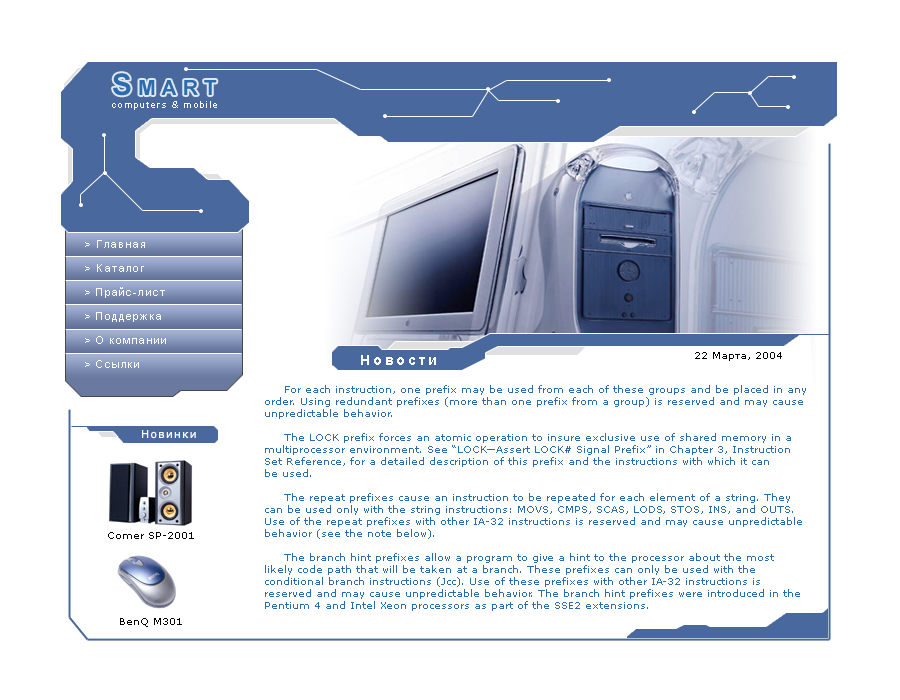
<style>
.page{position:relative;width:900px;height:700px;background:#ffffff}
.page>*{position:absolute;margin:0}
.t1{font:30px "Arial-BoldMT";letter-spacing:0.2em;color:#2b6caf;font-variant:small-caps}
.t2{font:9px "ArialMT";letter-spacing:0.15em;color:#ffffff}
.t3{font:11px/24px "ArialMT";letter-spacing:0.1em;color:#ffffff}
.t4{font:10px "Verdana";color:#000000}
.t5{font:14px "Arial-BoldMT";letter-spacing:0.2em;color:#ffffff}
.t6{font:10px/12px "Verdana";color:#2b6caf}
.t7{font:11px "Verdana";letter-spacing:0.1em;color:#ffffff}
</style>
<div class="page">
<p class="t1" style="left:113px;top:73px;width:104px;height:23px">Smart</p>
<p class="t2" style="left:112px;top:101px;width:105px;height:9px">computers &amp; mobile</p>
<p class="t3" style="left:85px;top:240px;width:81px;height:128px">&gt; Главная<br>&gt; Каталог<br>&gt; Прайс-лист<br>&gt; Поддержка<br>&gt; О компании<br>&gt; Ссылки</p>
<p class="t4" style="left:695px;top:352px;width:87px;height:9px">22 Марта, 2004</p>
<p class="t5" style="left:361px;top:355px;width:75px;height:10px">Новости</p>
<p class="t6" style="left:265px;top:385px;width:541px;height:226px">For each instruction, one prefix may be used from each of these groups and be placed in any<br>order. Using redundant prefixes (more than one prefix from a group) is reserved and may cause<br>unpredictable behavior.<br><br>     The LOCK prefix forces an atomic operation to insure exclusive use of shared memory in a<br>multiprocessor environment. See “LOCK—Assert LOCK# Signal Prefix” in Chapter 3, Instruction<br>Set Reference, for a detailed description of this prefix and the instructions with which it can<br>be used.<br><br>     The repeat prefixes cause an instruction to be repeated for each element of a string. They <br>can be used only with the string instructions: MOVS, CMPS, SCAS, LODS, STOS, INS, and OUTS.<br>Use of the repeat prefixes with other IA-32 instructions is reserved and may cause unpredictable<br>behavior (see the note below).<br><br>     The branch hint prefixes allow a program to give a hint to the processor about the most <br>likely code path that will be taken at a branch. These prefixes can only be used with the <br>conditional branch instructions (Jcc). Use of these prefixes with other IA-32 instructions is <br>reserved and may cause unpredictable behavior. The branch hint prefixes were introduced in the <br>Pentium 4 and Intel Xeon processors as part of the SSE2 extensions.</p>
<p class="t7" style="left:142px;top:430px;width:54px;height:9px">Новинки</p>
<p class="t4" style="left:108px;top:532px;width:86px;height:7px">Comer SP-2001</p>
<p class="t4" style="left:120px;top:618px;width:62px;height:9px">BenQ M301</p>
</div>
